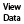
<style>
.page{position:relative;width:24px;height:24px;background:#ffffff}
.page>*{position:absolute;margin:0}
.t1{font:9px "MyriadPro-Regular";color:#000000}
</style>
<div class="page">
<p class="t1" style="left:3px;top:3px;width:18px;height:18px;text-align:center">View<br>Data</p>
</div>
